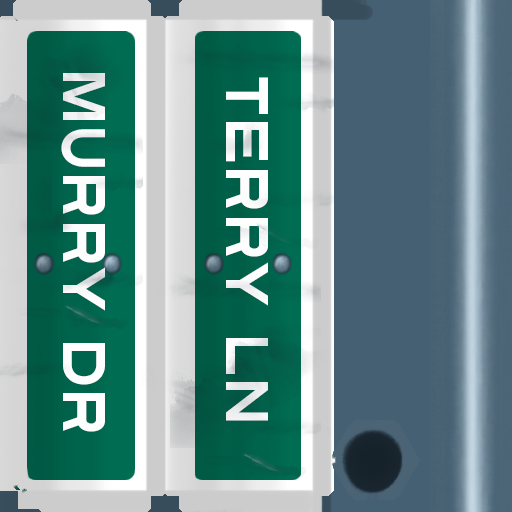
<style>
.page{position:relative;width:512px;height:512px}
.page>*{position:absolute;margin:0}
.t1{font:60px "Turnpike";color:#fefeff;scale:0.75 1}
</style>
<div class="page">
<p class="t1" style="left:61px;top:73px;width:44px;height:359px;rotate:90deg">Murry Dr</p>
<p class="t1" style="left:226px;top:77px;width:42px;height:344px;rotate:90deg">Terry Ln</p>
</div>
